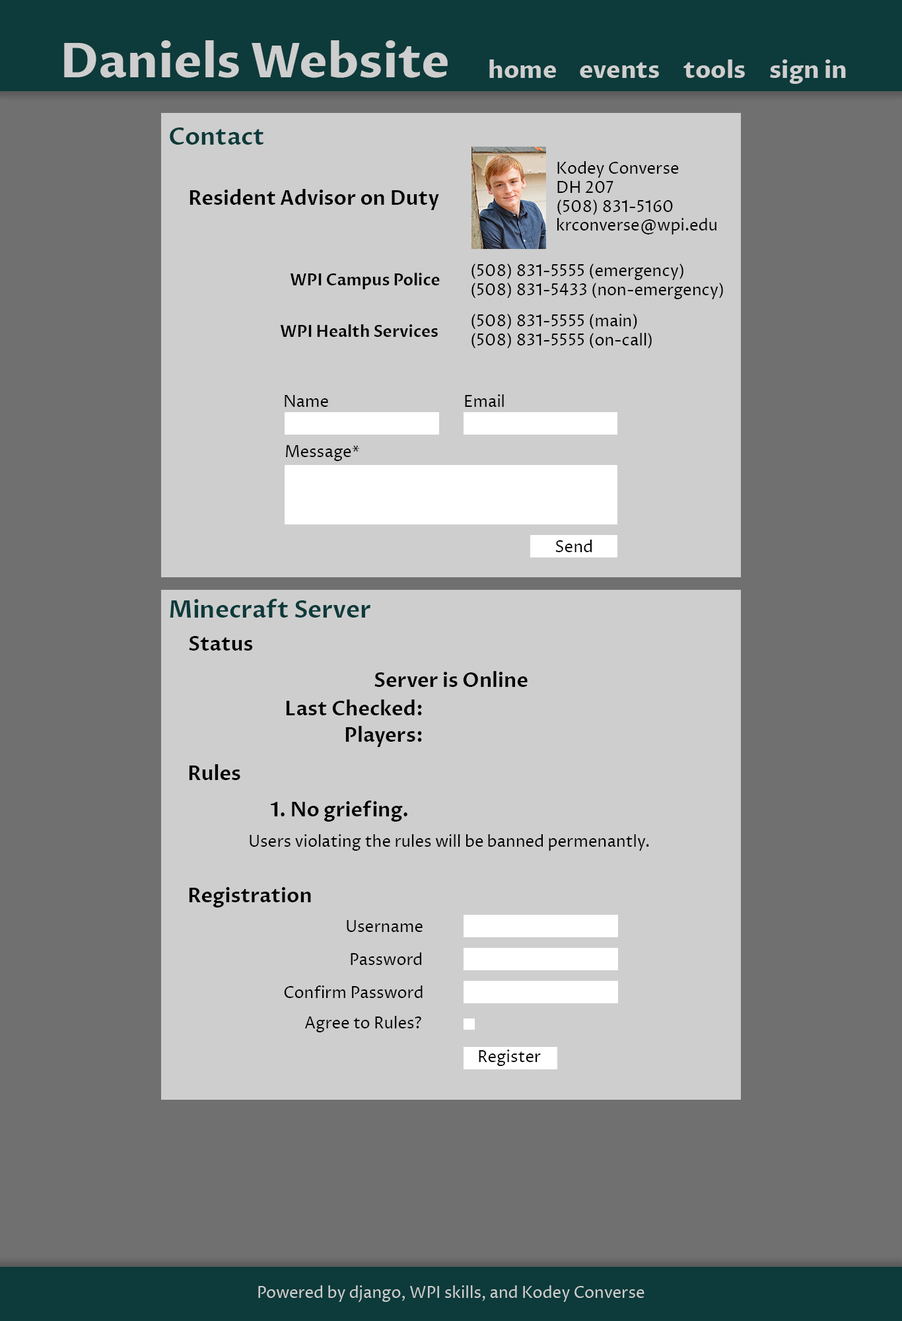
<style>
.page{position:relative;width:902px;height:1321px;background:#707070}
.page>*{position:absolute;margin:0}
.t1{font:47.6px "ProzaLibre-Bold";color:#cecece}
.t2{font:23.8px "ProzaLibre-Bold";color:#cecece}
.t3{font:23.8px "ProzaLibre-SemiBold";color:#0d3a3a}
.t4{font:15.9px "ProzaLibre-Regular";color:#000000}
.t5{font:19.8px "ProzaLibre-SemiBold";color:#000000}
.t6{font:15.9px "ProzaLibre-SemiBold";color:#000000}
.t7{font:15.9px "ProzaLibre-Regular";color:#cecece}
</style>
<div class="page">
<p class="t1" style="left:64px;top:40px;width:384px;height:38px">Daniels Website</p>
<p class="t2" style="left:490px;top:59px;width:66px;height:19px">home</p>
<p class="t2" style="left:580px;top:62px;width:79px;height:16px">events</p>
<p class="t2" style="left:684px;top:59px;width:61px;height:19px">tools</p>
<p class="t2" style="left:770px;top:59px;width:76px;height:25px">sign in</p>
<p class="t3" style="left:170px;top:128px;width:94px;height:17px">Contact</p>
<p class="t4" style="left:558px;top:161px;width:159px;height:74px">Kodey Converse<br>DH 207<br>(508) 831-5160<br>krconverse@wpi.edu</p>
<p class="t5" style="left:190px;top:189px;width:249px;height:21px">Resident Advisor on Duty</p>
<p class="t4" style="left:472px;top:264px;width:251px;height:35px">(508) 831-5555 (emergency)<br>(508) 831-5433 (non-emergency)</p>
<p class="t6" style="left:290px;top:273px;width:150px;height:16px">WPI Campus Police</p>
<p class="t4" style="left:472px;top:314px;width:180px;height:35px">(508) 831-5555 (main)<br>(508) 831-5555 (on-call)</p>
<p class="t6" style="left:280px;top:324px;width:158px;height:13px">WPI Health Services</p>
<p class="t4" style="left:285px;top:395px;width:43px;height:12px">Name</p>
<p class="t4" style="left:465px;top:394px;width:39px;height:13px">Email</p>
<p class="t4" style="left:286px;top:445px;width:73px;height:16px">Message*</p>
<p class="t4" style="left:556px;top:540px;width:36px;height:12px">Send</p>
<p class="t3" style="left:170px;top:599px;width:201px;height:19px">Minecraft Server</p>
<p class="t5" style="left:189px;top:636px;width:64px;height:15px">Status</p>
<p class="t5" style="left:375px;top:671px;width:153px;height:16px">Server is Online</p>
<p class="t5" style="left:286px;top:700px;width:136px;height:15px">Last Checked:</p>
<p class="t5" style="left:346px;top:726px;width:76px;height:21px">Players:</p>
<p class="t5" style="left:189px;top:764px;width:51px;height:16px">Rules</p>
<p class="t5" style="left:271px;top:801px;width:137px;height:21px">1. No griefing.</p>
<p class="t4" style="left:250px;top:834px;width:399px;height:17px">Users violating the rules will be banned permenantly.</p>
<p class="t5" style="left:189px;top:887px;width:122px;height:21px">Registration</p>
<p class="t4" style="left:347px;top:920px;width:76px;height:12px">Username</p>
<p class="t4" style="left:351px;top:953px;width:70px;height:12px">Password</p>
<p class="t4" style="left:284px;top:986px;width:139px;height:12px">Confirm Password</p>
<p class="t4" style="left:305px;top:1016px;width:116px;height:17px">Agree to Rules?</p>
<p class="t4" style="left:479px;top:1050px;width:62px;height:16px">Register</p>
<p class="t7" style="left:258px;top:1286px;width:387px;height:17px">Powered by django, WPI skills, and Kodey Converse</p>
</div>
